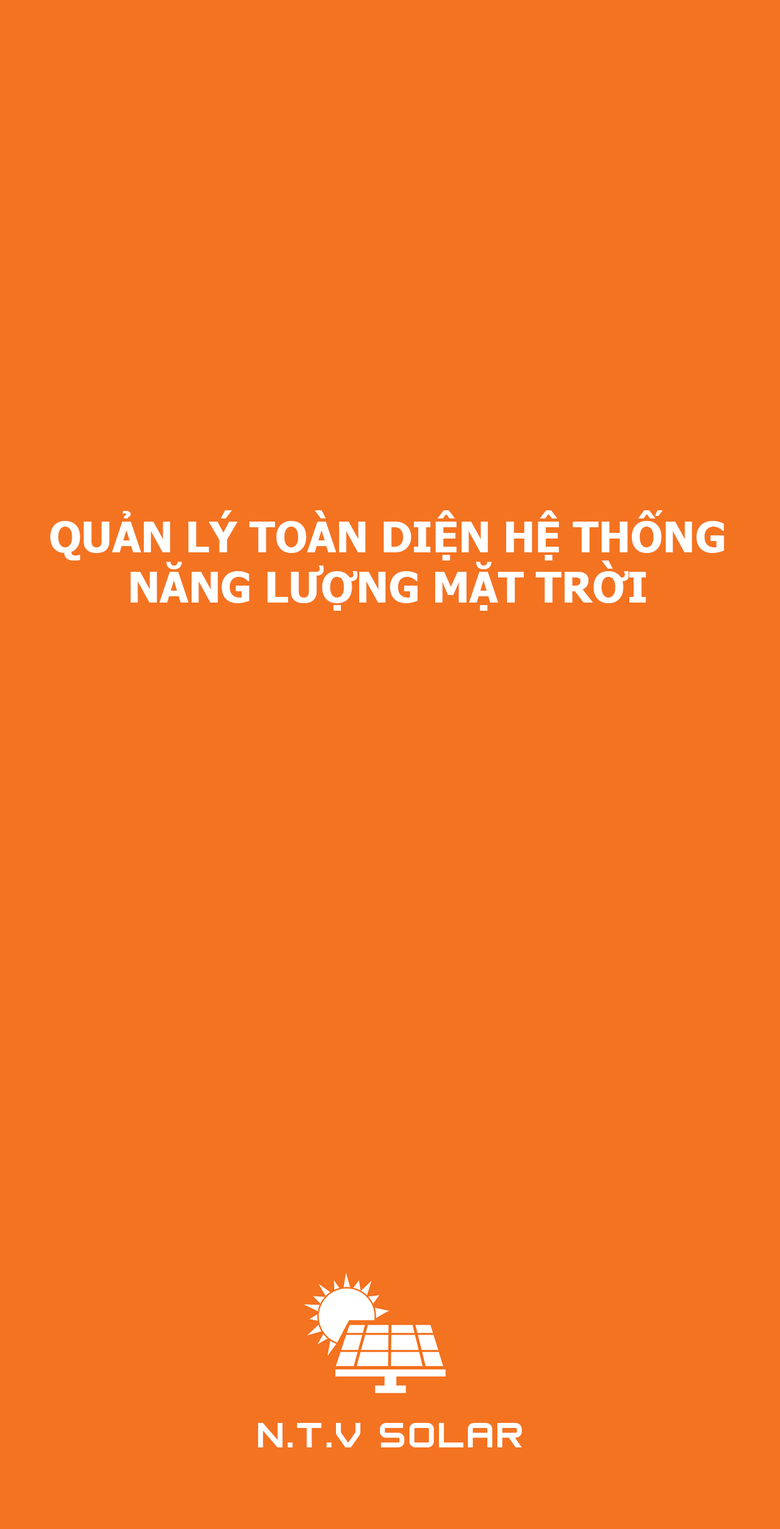
<style>
.page{position:relative;width:780px;height:1529px;background:#f47321}
.page>*{position:absolute;margin:0}
.t1{font:41.9px "Tahoma-Bold";color:#ffffff}
.t2{font:36.6px "Trivial-Bold";color:#ffffff}
</style>
<div class="page">
<p class="t1" style="left:50px;top:510px;width:674px;height:101px;text-align:center">QUẢN LÝ TOÀN DIỆN HỆ THỐNG<br>NĂNG LƯỢNG MẶT TRỜI</p>
<p class="t2" style="left:258px;top:1423px;width:264px;height:25px">N.T.V SOLAR</p>
</div>
